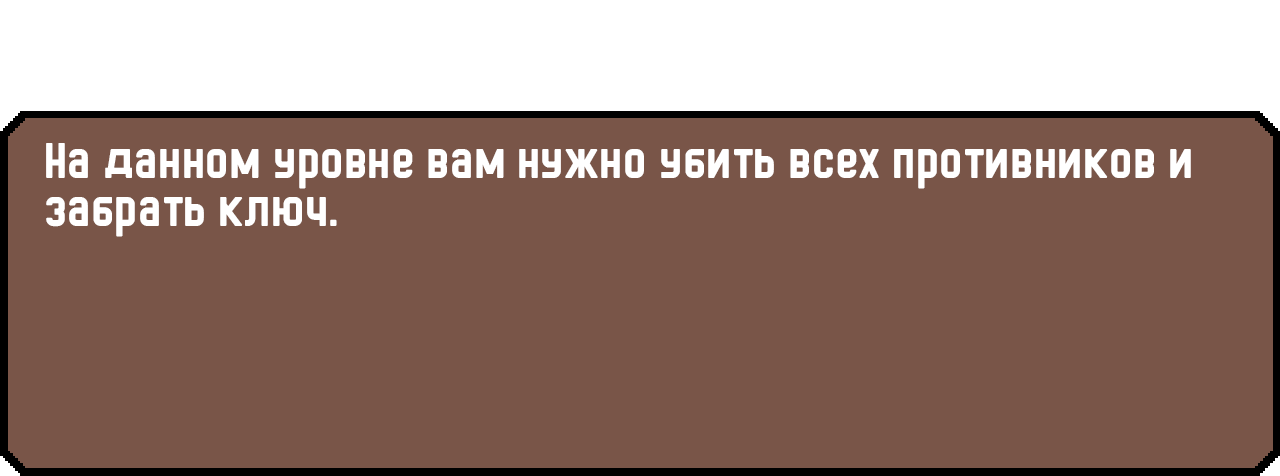
<style>
.page{position:relative;width:1280px;height:476px;background:#795548}
.page>*{position:absolute;margin:0}
.t1{font:48px/48px "HermanoMayor";color:#ffffff}
</style>
<div class="page">
<p class="t1" style="left:46px;top:143px;width:1145px;height:94px">На данном уровне вам нужно убить всех противников и забрать ключ.</p>
</div>
